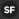
<style>
.page{position:relative;width:19px;height:19px;background:#202020}
.page>*{position:absolute;margin:0}
.t1{font:9px "Montserrat-Regular";color:#ffffff}
</style>
<div class="page">
<p class="t1" style="left:4px;top:6px;width:11px;height:8px">SF</p>
</div>
